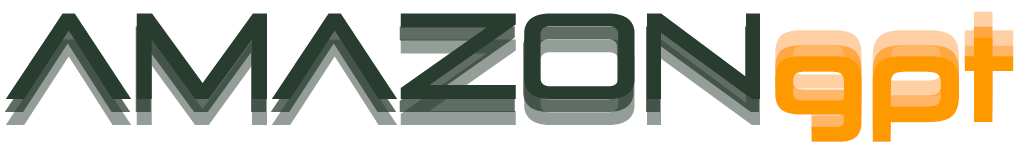
<style>
.page{position:relative;width:1018px;height:148px;background:#ffffff}
.page>*{position:absolute;margin:0}
.t1{font:121.4px "PirulenRg-Regular";letter-spacing:-0.02em;color:#293c30}
.t2{font:121.4px "NeuropoliticalRg-Regular";letter-spacing:-0.02em}
.t3{font:121.4px "PirulenRg-Regular";letter-spacing:-0.02em}
.t4{font:121.4px "NeuropoliticalRg-Regular";letter-spacing:-0.02em;color:#ff9900}
</style>
<div class="page">
<p class="t1" style="left:6px;top:13px;width:754px;height:86px">amazon</p>
<p class="t1" style="left:6px;top:13px;width:754px;height:86px">amazon</p>
<p class="t2" style="left:775px;top:11px;width:239px;height:105px">gpt</p>
<p class="t2" style="left:775px;top:11px;width:239px;height:105px">gpt</p>
<p class="t3" style="left:5px;top:26px;width:754px;height:86px">amazon</p>
<p class="t3" style="left:5px;top:26px;width:754px;height:86px">amazon</p>
<p class="t2" style="left:775px;top:26px;width:239px;height:105px">gpt</p>
<p class="t2" style="left:775px;top:26px;width:239px;height:105px">gpt</p>
<p class="t3" style="left:6px;top:39px;width:754px;height:86px">amazon</p>
<p class="t3" style="left:6px;top:39px;width:754px;height:86px">amazon</p>
<p class="t4" style="left:775px;top:37px;width:239px;height:105px">gpt</p>
<p class="t4" style="left:775px;top:37px;width:239px;height:105px">gpt</p>
</div>
